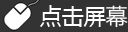
<style>
.page{position:relative;width:128px;height:32px;background:#333333}
.page>*{position:absolute;margin:0}
.t1{font:22px "MicrosoftYaHei";color:#ffffff}
</style>
<div class="page">
<p class="t1" style="left:40px;top:5px;width:88px;height:23px">点击屏幕</p>
</div>
